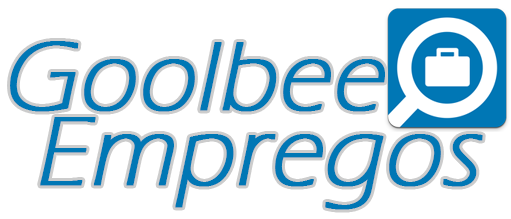
<style>
.page{position:relative;width:511px;height:219px;background:#ffffff}
.page>*{position:absolute;margin:0}
.t1{font:100px "ErasITC-Light";color:#0077b5;font-weight:bold;font-style:italic}
</style>
<div class="page">
<p class="t1" style="left:10px;top:41px;width:375px;height:71px">Goolbee</p>
<p class="t1" style="left:40px;top:117px;width:443px;height:93px">Empregos</p>
</div>
